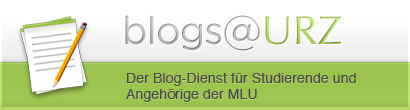
<style>
.page{position:relative;width:410px;height:110px}
.page>*{position:absolute;margin:0}
.t1{font:38.5px "GothamRounded-Book";letter-spacing:-0.025em}
.t2{font:40.1px "GothamRounded-Book"}
.t3{font:40.1px "Optima-Regular"}
.t4{font:14px/16px "Helvetica";letter-spacing:0.01em;color:#4c4b4b}
</style>
<div class="page">
<p class="t1" style="left:125px;top:15px;width:216px;height:36px">blogs<span class="t2">@</span><span class="t3">URZ</span></p>
<p class="t1" style="left:125px;top:15px;width:216px;height:36px">blogs<span class="t2">@</span><span class="t3">URZ</span></p>
<p class="t4" style="left:126px;top:73px;width:230px;height:29px">Der Blog-Dienst für Studierende und Angehörige der MLU</p>
</div>
